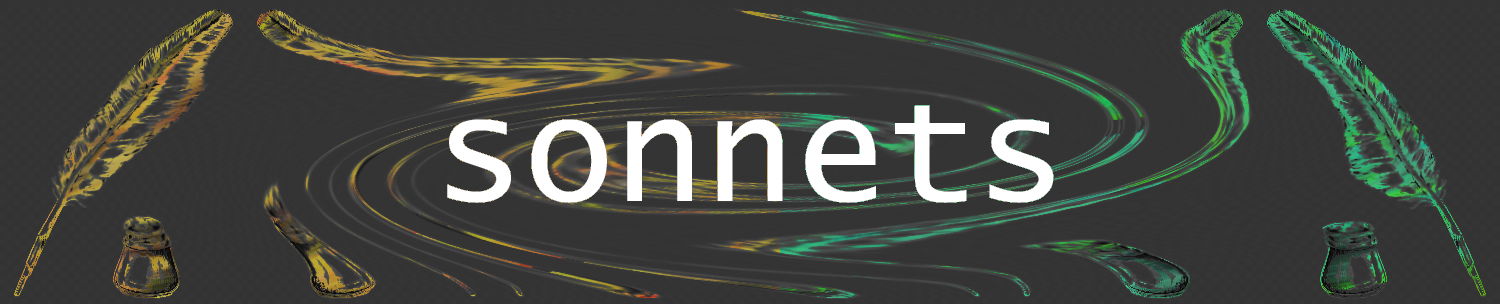
<style>
.page{position:relative;width:1500px;height:304px;background:#333333}
.page>*{position:absolute;margin:0}
.t1{font:150px "LucidaSans-Typewriter";color:#ffffff}
</style>
<div class="page">
<p class="t1" style="left:447px;top:105px;width:607px;height:98px">sonnets</p>
</div>
